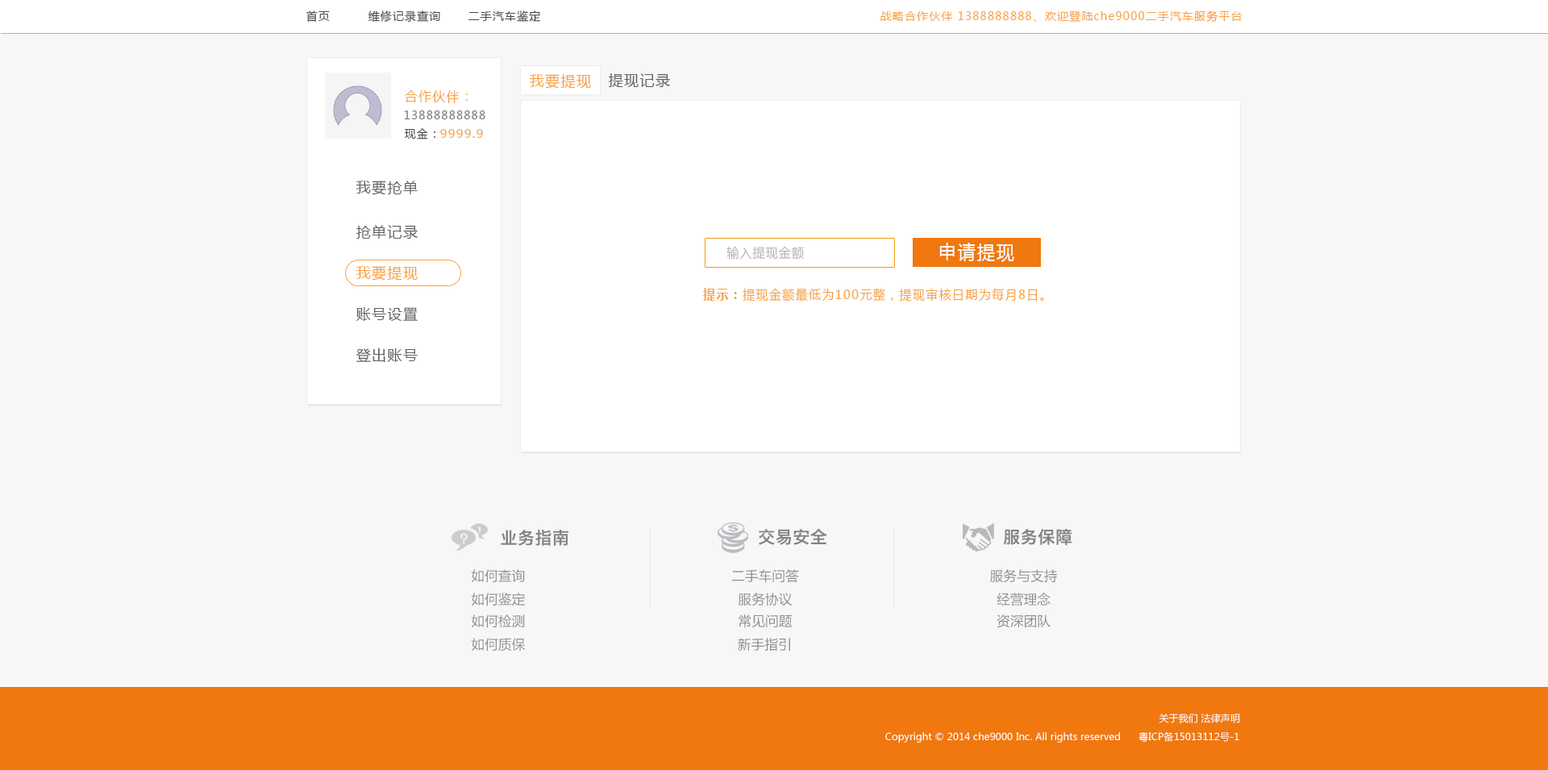
<style>
.page{position:relative;width:1548px;height:770px;background:#f7f7f7}
.page>*{position:absolute;margin:0}
.t1{font:11.3px "MicrosoftYaHei";letter-spacing:0.08em;color:#494949}
.t2{font:11.3px "MicrosoftYaHei";letter-spacing:0.08em;color:#f7a13c}
.t3{font:14.5px "MicrosoftYaHei";letter-spacing:0.08em;color:#f7a13c}
.t4{font:14.5px "MicrosoftYaHei";letter-spacing:0.08em;color:#606060}
.t5{font:12.9px "MicrosoftYaHei";letter-spacing:0.08em;color:#f7a13c}
.t6{font:11.3px "MicrosoftYaHei";letter-spacing:0.08em;color:#787373}
.t7{font:12.1px "MicrosoftYaHei";letter-spacing:0.08em;color:#f7a13c}
.t8{font:12.9px "MicrosoftYaHei";letter-spacing:0.08em;color:#b4b4b4;scale:0.93 1}
.t9{font:19.4px "MicrosoftYaHei";letter-spacing:0.08em;color:#ffffff;scale:0.93 1}
.t10{font:12.9px "MicrosoftYaHei";letter-spacing:0.1em;color:#f7a13c;scale:0.93 1}
.t11{font:12.9px "MicrosoftYaHei-Bold";letter-spacing:0.1em;color:#f7a13c;scale:0.93 1}
.t12{font:17.2px "HiraginoSansGB-W6";letter-spacing:0.01em;color:#838383}
.t13{font:13.4px "MicrosoftYaHei";letter-spacing:0.01em;color:#909090}
.t14{font:9.7px "MicrosoftYaHei";letter-spacing:0.01em;color:#ffffff}
</style>
<div class="page">
<p class="t1" style="left:306px;top:10px;width:24px;height:12px">首页</p>
<p class="t1" style="left:368px;top:10px;width:72px;height:13px">维修记录查询</p>
<p class="t1" style="left:469px;top:10px;width:71px;height:12px">二手汽车鉴定</p>
<p class="t2" style="left:881px;top:10px;width:362px;height:12px">战略合作伙伴 1388888888、欢迎登陆che9000二手汽车服务平台</p>
<p class="t3" style="left:529px;top:74px;width:62px;height:15px">我要提现</p>
<p class="t4" style="left:609px;top:73px;width:61px;height:15px">提现记录</p>
<p class="t5" style="left:404px;top:90px;width:64px;height:13px">合作伙伴：</p>
<p class="t6" style="left:404px;top:110px;width:81px;height:9px">13888888888</p>
<p class="t1" style="left:405px;top:128px;width:30px;height:12px">现金：</p>
<p class="t7" style="left:440px;top:129px;width:43px;height:9px">9999.9</p>
<p class="t4" style="left:356px;top:181px;width:62px;height:14px">我要抢单</p>
<p class="t4" style="left:356px;top:225px;width:62px;height:15px">抢单记录</p>
<p class="t8" style="left:727px;top:246px;width:77px;height:14px">输入提现金额</p>
<p class="t9" style="left:939px;top:243px;width:75px;height:19px">申请提现</p>
<p class="t3" style="left:356px;top:266px;width:62px;height:15px">我要提现</p>
<p class="t10" style="left:703px;top:288px;width:341px;height:14px"><span class="t11">提示：</span>提现金额最低为100元整，提现审核日期为每月8日。</p>
<p class="t4" style="left:356px;top:307px;width:62px;height:14px">账号设置</p>
<p class="t4" style="left:356px;top:348px;width:62px;height:14px">登出账号</p>
<p class="t12" style="left:501px;top:530px;width:68px;height:16px">业务指南</p>
<p class="t12" style="left:759px;top:529px;width:68px;height:16px">交易安全</p>
<p class="t12" style="left:1003px;top:528px;width:70px;height:18px">服务保障</p>
<p class="t13" style="left:471px;top:569px;width:54px;height:14px">如何查询</p>
<p class="t13" style="left:731px;top:569px;width:68px;height:14px">二手车问答</p>
<p class="t13" style="left:990px;top:569px;width:68px;height:14px">服务与支持</p>
<p class="t13" style="left:471px;top:593px;width:54px;height:13px">如何鉴定</p>
<p class="t13" style="left:738px;top:593px;width:54px;height:13px">服务协议</p>
<p class="t13" style="left:997px;top:593px;width:54px;height:13px">经营理念</p>
<p class="t13" style="left:471px;top:614px;width:54px;height:14px">如何检测</p>
<p class="t13" style="left:739px;top:614px;width:54px;height:14px">常见问题</p>
<p class="t13" style="left:997px;top:614px;width:54px;height:14px">资深团队</p>
<p class="t13" style="left:471px;top:638px;width:54px;height:14px">如何质保</p>
<p class="t13" style="left:738px;top:638px;width:52px;height:14px">新手指引</p>
<p class="t14" style="left:1159px;top:714px;width:81px;height:9px">关于我们 法律声明</p>
<p class="t14" style="left:885px;top:731px;width:354px;height:12px">Copyright © 2014 che9000 Inc. All rights reserved      粤ICP备15013112号-1</p>
</div>
